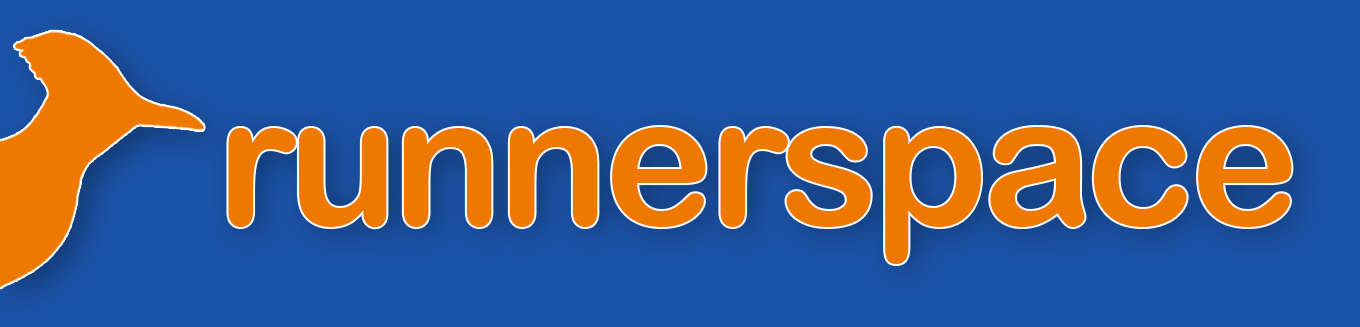
<style>
.page{position:relative;width:1360px;height:327px;background:#1b53a8}
.page>*{position:absolute;margin:0}
.t1{font:184.3px "ArialRoundedMTBold";letter-spacing:-0.03em;color:#ef7900}
</style>
<div class="page">
<p class="t1" style="left:228px;top:127px;width:1064px;height:137px">runnerspace</p>
</div>
